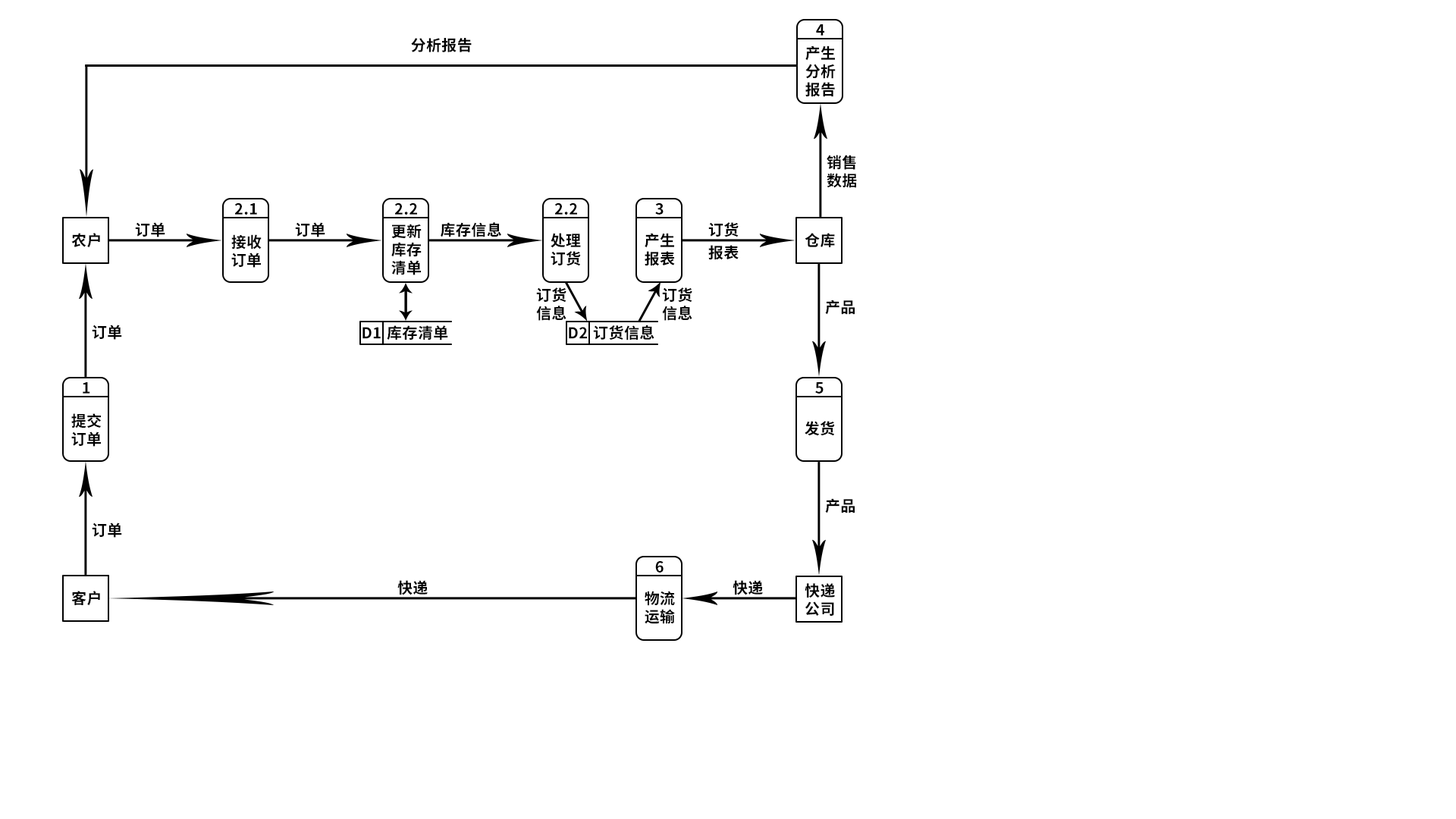
<style>
.page{position:relative;width:1456px;height:819px;background:#ffffff}
.page>*{position:absolute;margin:0}
.t1{font:15.2px "SourceHanSansCN-Bold";letter-spacing:0.02em;color:#000000}
</style>
<div class="page">
<p class="t1" style="left:816px;top:24px;width:8px;height:12px">4</p>
<p class="t1" style="left:411px;top:38px;width:61px;height:14px">分析报告</p>
<p class="t1" style="left:805px;top:45px;width:31px;height:52px;text-align:center">产生<br>分析<br>报告</p>
<p class="t1" style="left:827px;top:155px;width:30px;height:33px;text-align:center">销售<br>数据</p>
<p class="t1" style="left:234px;top:202px;width:23px;height:13px">2.1</p>
<p class="t1" style="left:394px;top:202px;width:23px;height:13px">2.2</p>
<p class="t1" style="left:554px;top:202px;width:23px;height:13px">2.2</p>
<p class="t1" style="left:655px;top:202px;width:9px;height:13px">3</p>
<p class="t1" style="left:71px;top:233px;width:29px;height:15px">农户</p>
<p class="t1" style="left:135px;top:222px;width:30px;height:15px">订单</p>
<p class="t1" style="left:295px;top:222px;width:30px;height:15px">订单</p>
<p class="t1" style="left:391px;top:224px;width:31px;height:51px;text-align:center">更新<br>库存<br>清单</p>
<p class="t1" style="left:441px;top:222px;width:60px;height:15px">库存信息</p>
<p class="t1" style="left:551px;top:233px;width:30px;height:33px;text-align:center">处理<br>订货</p>
<p class="t1" style="left:645px;top:233px;width:30px;height:33px;text-align:center">产生<br>报表</p>
<p class="t1" style="left:708px;top:222px;width:31px;height:15px">订货</p>
<p class="t1" style="left:805px;top:233px;width:30px;height:14px">仓库</p>
<p class="t1" style="left:231px;top:234px;width:31px;height:34px;text-align:center">接收<br>订单</p>
<p class="t1" style="left:708px;top:245px;width:31px;height:15px">报表</p>
<p class="t1" style="left:536px;top:287px;width:30px;height:34px;text-align:center">订货<br>信息</p>
<p class="t1" style="left:662px;top:287px;width:30px;height:34px;text-align:center">订货<br>信息</p>
<p class="t1" style="left:825px;top:300px;width:30px;height:15px">产品</p>
<p class="t1" style="left:92px;top:325px;width:30px;height:15px">订单</p>
<p class="t1" style="left:362px;top:327px;width:19px;height:12px">D1</p>
<p class="t1" style="left:387px;top:325px;width:61px;height:15px">库存清单</p>
<p class="t1" style="left:569px;top:327px;width:18px;height:12px">D2</p>
<p class="t1" style="left:593px;top:325px;width:61px;height:15px">订货信息</p>
<p class="t1" style="left:83px;top:382px;width:7px;height:12px">1</p>
<p class="t1" style="left:815px;top:382px;width:9px;height:12px">5</p>
<p class="t1" style="left:71px;top:413px;width:31px;height:34px;text-align:center">提交<br>订单</p>
<p class="t1" style="left:805px;top:421px;width:30px;height:15px">发货</p>
<p class="t1" style="left:825px;top:498px;width:30px;height:15px">产品</p>
<p class="t1" style="left:92px;top:522px;width:30px;height:16px">订单</p>
<p class="t1" style="left:655px;top:560px;width:9px;height:13px">6</p>
<p class="t1" style="left:397px;top:580px;width:31px;height:15px">快递</p>
<p class="t1" style="left:733px;top:580px;width:30px;height:15px">快递</p>
<p class="t1" style="left:71px;top:591px;width:29px;height:15px">客户</p>
<p class="t1" style="left:645px;top:591px;width:30px;height:33px;text-align:center">物流<br>运输</p>
<p class="t1" style="left:805px;top:583px;width:30px;height:33px;text-align:center">快递<br>公司</p>
</div>
